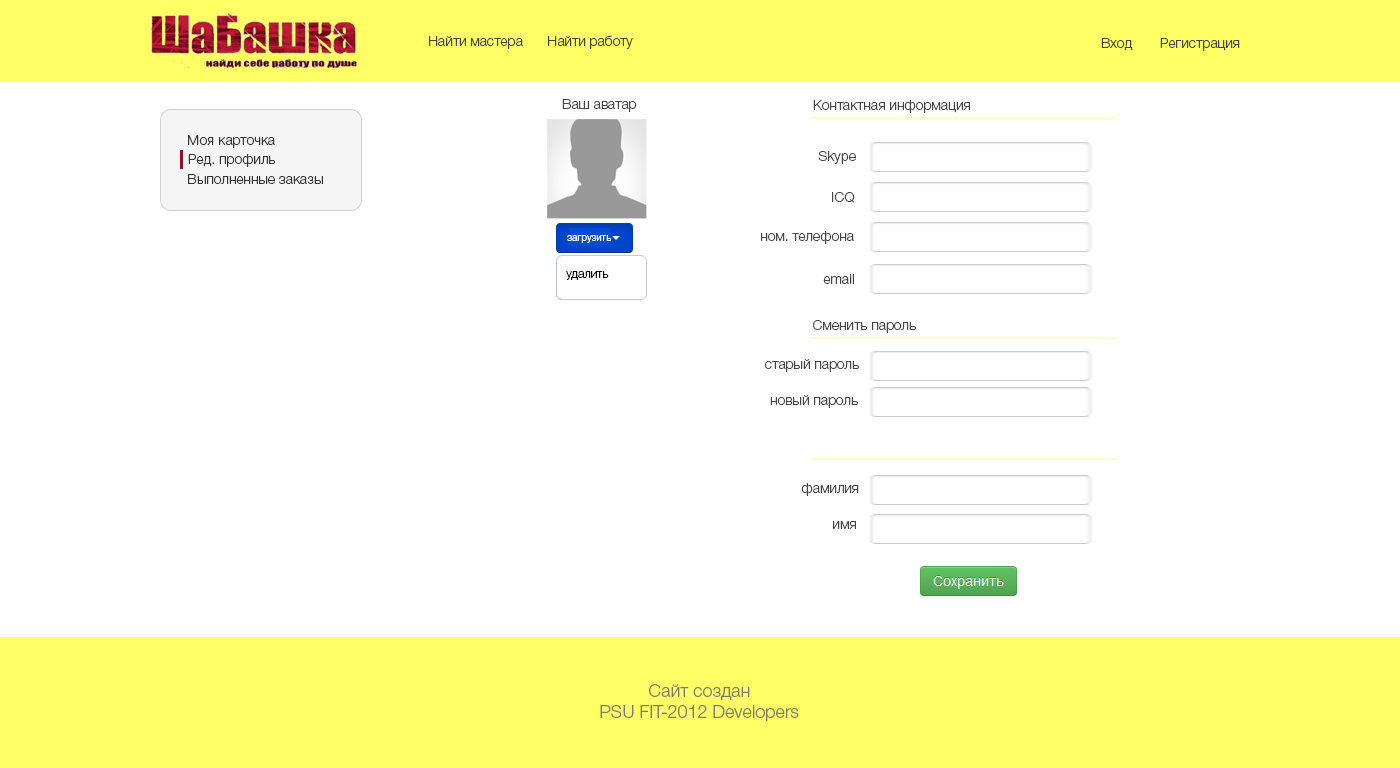
<style>
.page{position:relative;width:1400px;height:768px;background:#ffffff}
.page>*{position:absolute;margin:0}
.t1{font:14px "HelveticaNeueCyr-Light";color:#444241}
.t2{font:14px "HelveticaNeueCyr-Light";color:#444444}
.t3{font:14px "HelveticaNeueCyr-Light";color:#333333}
.t4{font:10px "HelveticaNeueCyr-Light";color:#ffffff}
.t5{font:12px "HelveticaNeueCyr-Light";color:#000000}
.t6{font:18px "HelveticaNeueCyr-Light";color:#7c7a6a}
</style>
<div class="page">
<p class="t1" style="left:429px;top:36px;width:94px;height:13px">Найти мастера</p>
<p class="t1" style="left:548px;top:35px;width:85px;height:14px">Найти работу</p>
<p class="t1" style="left:1101px;top:38px;width:139px;height:13px">Вход       Регистрация</p>
<p class="t2" style="left:562px;top:99px;width:75px;height:13px">Ваш аватар</p>
<p class="t2" style="left:813px;top:100px;width:157px;height:13px">Контактная информация</p>
<p class="t3" style="left:188px;top:135px;width:87px;height:13px">Моя карточка</p>
<p class="t3" style="left:188px;top:154px;width:88px;height:13px">Ред. профиль</p>
<p class="t2" style="left:818px;top:151px;width:38px;height:13px">Skype</p>
<p class="t3" style="left:188px;top:174px;width:135px;height:10px">Выполненные заказы</p>
<p class="t2" style="left:832px;top:192px;width:23px;height:11px">ICQ</p>
<p class="t2" style="left:761px;top:231px;width:93px;height:13px">ном. телефона</p>
<p class="t4" style="left:567px;top:235px;width:45px;height:8px">загрузить</p>
<p class="t5" style="left:566px;top:271px;width:43px;height:9px">удалить</p>
<p class="t2" style="left:823px;top:274px;width:31px;height:10px">email</p>
<p class="t2" style="left:813px;top:320px;width:103px;height:13px">Сменить пароль</p>
<p class="t2" style="left:765px;top:359px;width:94px;height:13px">старый пароль</p>
<p class="t2" style="left:770px;top:395px;width:88px;height:13px">новый пароль</p>
<p class="t2" style="left:801px;top:483px;width:58px;height:13px">фамилия</p>
<p class="t2" style="left:833px;top:521px;width:23px;height:8px">имя</p>
<p class="t6" style="left:600px;top:684px;width:199px;height:37px;text-align:center">Сайт создан<br>PSU FIT-2012 Developers</p>
</div>
